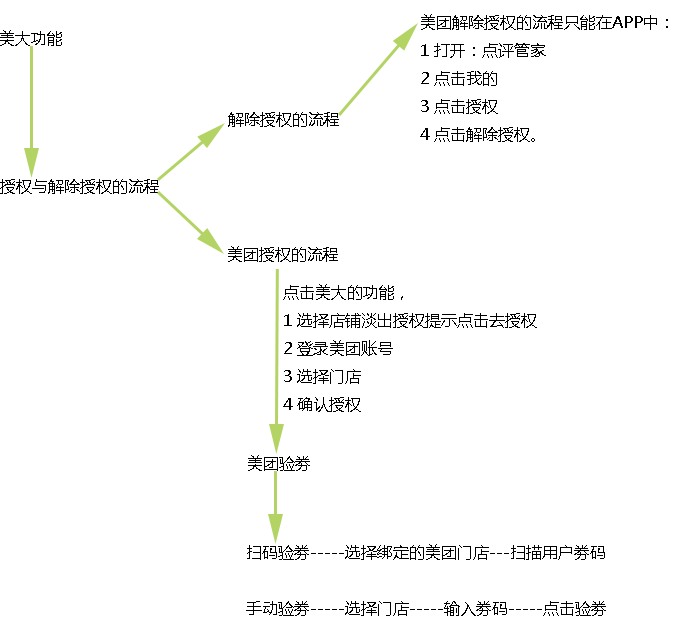
<style>
.page{position:relative;width:675px;height:634px;background:#ffffff}
.page>*{position:absolute;margin:0}
.t1{font:16px "MicrosoftYaHei";color:#000000}
</style>
<div class="page">
<p class="t1" style="left:420px;top:14px;width:248px;height:128px">美团解除授权的流程只能在APP中：<br>1 打开：点评管家<br>2 点击我的<br>3 点击授权<br>4 点击解除授权。</p>
<p class="t1" style="left:0px;top:30px;width:62px;height:16px">美大功能</p>
<p class="t1" style="left:228px;top:112px;width:111px;height:15px">解除授权的流程</p>
<p class="t1" style="left:0px;top:179px;width:159px;height:15px">授权与解除授权的流程</p>
<p class="t1" style="left:228px;top:246px;width:110px;height:16px">美团授权的流程</p>
<p class="t1" style="left:283px;top:284px;width:254px;height:128px">点击美大的功能，<br>1 选择店铺淡出授权提示点击去授权<br>2 登录美团账号<br>3 选择门店<br>4 确认授权</p>
<p class="t1" style="left:248px;top:455px;width:62px;height:16px">美团验劵</p>
<p class="t1" style="left:246px;top:544px;width:360px;height:72px">扫码验劵-----选择绑定的美团门店---扫描用户劵码<br><br>手动验劵-----选择门店-----输入劵码-----点击验劵</p>
</div>
